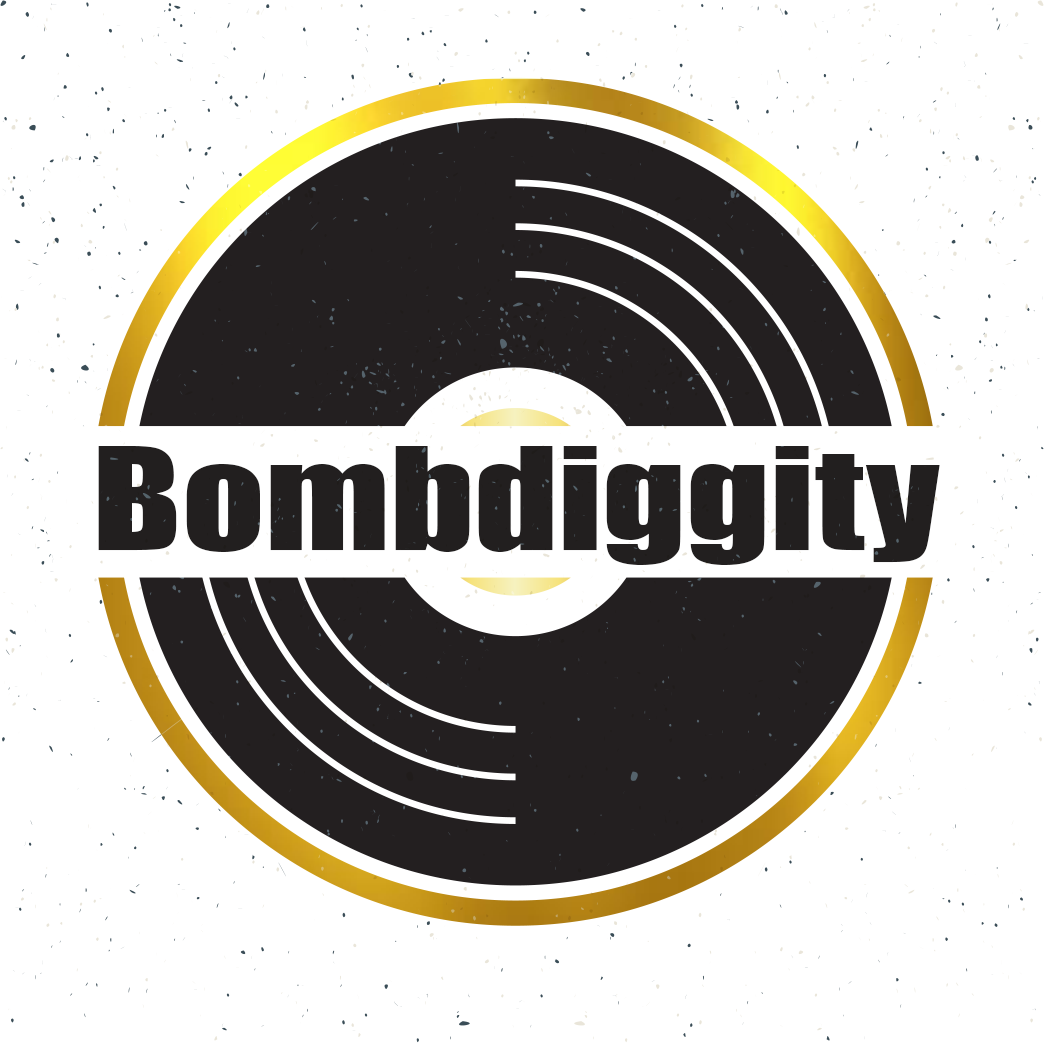
<style>
.page{position:relative;width:1044px;height:1043px;background:#ffffff}
.page>*{position:absolute;margin:0}
.t1{font:130.9px "Impact";color:#231f20;scale:1.24 1}
</style>
<div class="page">
<p class="t1" style="left:98px;top:446px;width:842px;height:119px">Bombdiggity</p>
</div>
